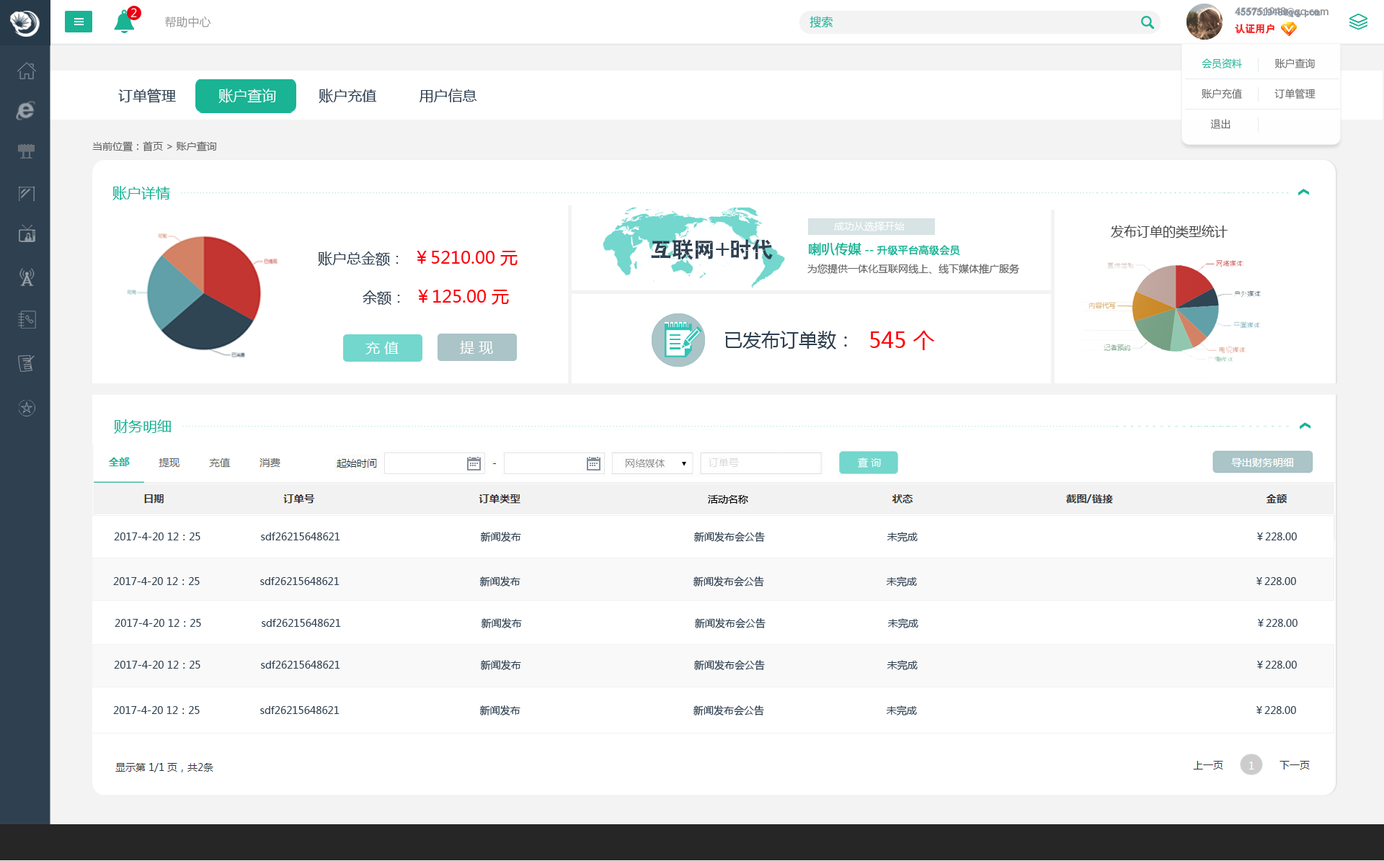
<style>
.page{position:relative;width:1384px;height:861px;background:#ffffff}
.page>*{position:absolute;margin:0}
.t1{font:11.5px "MicrosoftYaHei";color:#ffffff}
.t2{font:11.5px "MicrosoftYaHei";color:#999999}
.t3{font:11.5px "MicrosoftYaHei";color:#1ab394}
.t4{font:10.1px/17.3px "AdobeHeitiStd-Regular";color:#999999}
.t5{font:10.1px/17.3px "AdobeHeitiStd-Regular";color:#f61e1e}
.t6{font:10.1px/17.3px "AdobeHeitiStd-Regular";color:#ffffff}
.t7{font:10.1px/17.3px "SimSun";color:#8894a4;font-weight:bold}
.t8{font:10.1px/17.3px "SimSun";color:#f61e1e}
.t9{font:10.1px/30.3px "MicrosoftYaHei";color:#666666}
.t10{font:10.1px/30.3px "MicrosoftYaHei";color:#1ab394}
.t11{font:14.4px "MicrosoftYaHei";color:#2f4050}
.t12{font:14.4px "MicrosoftYaHei";color:#ffffff}
.t13{font:10.1px "MicrosoftYaHei";color:#666666}
.t14{font:14.4px "MicrosoftYaHei";color:#1ab394}
.t15{font:10.1px "MicrosoftYaHei";color:#ffffff}
.t16{font:13px "MicrosoftYaHei";color:#474747}
.t17{font:21.6px "JZuJie";color:#2f4050}
.t18{font:10.1px "MicrosoftYaHei";color:#1ab394;font-weight:bold}
.t19{font:13px "MicrosoftYaHei";color:#1ab394;font-weight:bold}
.t20{font:17.3px "MicrosoftYaHei";color:#ff000c}
.t21{font:18.7px "MicrosoftYaHei";color:#2f4050}
.t22{font:21.6px "MicrosoftYaHei";color:#ff000c}
.t23{font:10.1px "MicrosoftYaHei";color:#000000}
.t24{font:10.1px "MicrosoftYaHei";color:#2f4050}
</style>
<div class="page">
<p class="t1" style="left:130px;top:8px;width:7px;height:9px">2</p>
<p class="t2" style="left:165px;top:16px;width:46px;height:12px">帮助中心</p>
<p class="t3" style="left:810px;top:16px;width:23px;height:12px">搜索</p>
<p class="t4" style="left:1235px;top:7px;width:94px;height:27px">455751948@qq.com<br><span class="t5">认证用户               </span><span class="t6">退出</span></p>
<p class="t7" style="left:1235px;top:8px;width:86px;height:26px">455751948@qq.com<br><span class="t8">认证用户</span></p>
<p class="t9" style="left:1202px;top:58px;width:114px;height:71px"><span class="t10">会员资料</span>           账户查询<br>账户充值           订单管理           <br>   退出</p>
<p class="t11" style="left:118px;top:89px;width:359px;height:14px">订单管理         <span class="t12"> 账户查询          </span>账户充值          用户信息</p>
<p class="t13" style="left:92px;top:141px;width:125px;height:10px">当前位置：首页 &gt; 账户查询</p>
<p class="t14" style="left:112px;top:186px;width:58px;height:14px">账户详情</p>
<p class="t15" style="left:834px;top:221px;width:71px;height:10px">成功从选择开始</p>
<p class="t16" style="left:1111px;top:225px;width:117px;height:14px">发布订单的类型统计</p>
<p class="t17" style="left:651px;top:239px;width:122px;height:21px">互联网+时代</p>
<p class="t18" style="left:809px;top:243px;width:151px;height:13px"><span class="t19">喇叭传媒</span> -- 升级平台高级会员</p>
<p class="t20" style="left:318px;top:251px;width:200px;height:15px"><span class="t11">账户总金额：  </span>￥5210.00 元</p>
<p class="t13" style="left:807px;top:264px;width:212px;height:11px">为您提供一体化互联网线上、线下媒体推广服务</p>
<p class="t20" style="left:363px;top:290px;width:146px;height:15px"><span class="t11">余额：  </span>￥125.00 元</p>
<p class="t12" style="left:366px;top:342px;width:33px;height:13px">充 值</p>
<p class="t12" style="left:460px;top:341px;width:33px;height:14px">提 现</p>
<p class="t21" style="left:725px;top:331px;width:122px;height:19px">已发布订单数：</p>
<p class="t22" style="left:870px;top:331px;width:65px;height:19px">545 个</p>
<p class="t14" style="left:114px;top:420px;width:57px;height:14px">财务明细</p>
<p class="t23" style="left:708px;top:495px;width:40px;height:9px">活动名称</p>
<p class="t24" style="left:114px;top:532px;width:1183px;height:10px">2017-4-20 12：25                    sdf26215648621                                               新闻发布                                                          新闻发布会公告                                         未完成                                                                                                                 ￥228.00</p>
<p class="t24" style="left:113px;top:577px;width:1183px;height:10px">2017-4-20 12：25                    sdf26215648621                                               新闻发布                                                          新闻发布会公告                                         未完成                                                                                                                 ￥228.00</p>
<p class="t24" style="left:115px;top:619px;width:1183px;height:10px">2017-4-20 12：25                    sdf26215648621                                               新闻发布                                                          新闻发布会公告                                         未完成                                                                                                                 ￥228.00</p>
<p class="t24" style="left:114px;top:660px;width:1183px;height:10px">2017-4-20 12：25                    sdf26215648621                                               新闻发布                                                          新闻发布会公告                                         未完成                                                                                                                 ￥228.00</p>
<p class="t24" style="left:113px;top:706px;width:1183px;height:10px">2017-4-20 12：25                    sdf26215648621                                               新闻发布                                                          新闻发布会公告                                         未完成                                                                                                                 ￥228.00</p>
</div>
